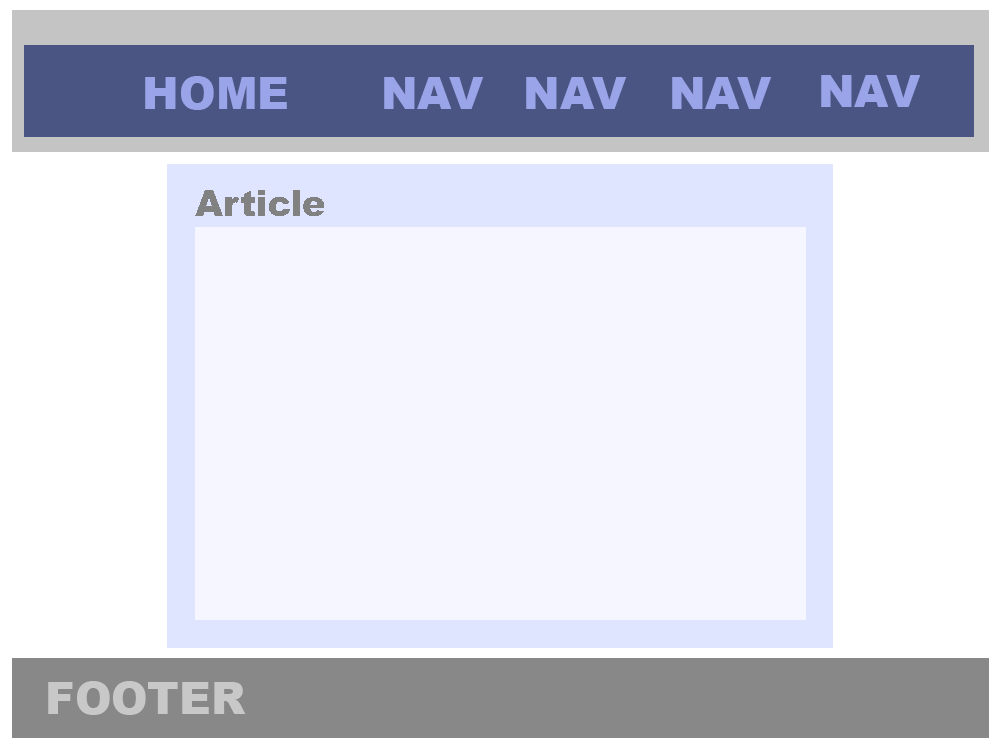
<style>
.page{position:relative;width:1000px;height:750px;background:#f5f6ff}
.page>*{position:absolute;margin:0}
.t1{font:44.1px "Arial-Black";color:#9aa5e9}
.t2{font:44.1px "Arial-Black";color:#c8c8c8}
</style>
<div class="page">
<p class="t1" style="left:145px;top:76px;width:142px;height:34px">HOME</p>
<p class="t1" style="left:384px;top:77px;width:100px;height:32px">NAV</p>
<p class="t1" style="left:526px;top:77px;width:101px;height:32px">NAV</p>
<p class="t1" style="left:672px;top:77px;width:100px;height:32px">NAV</p>
<p class="t1" style="left:821px;top:75px;width:100px;height:32px">NAV</p>
<p class="t2" style="left:48px;top:681px;width:198px;height:34px">FOOTER</p>
</div>
